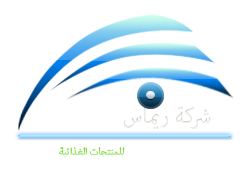
<style>
.page{position:relative;width:246px;height:180px;background:#ffffff}
.page>*{position:absolute;margin:0}
.t1{font:30px "AdobeArabic-Regular";color:#edeff0}
.t2{font:14px "AdobeArabic-Regular"}
</style>
<div class="page">
<p class="t1" style="left:124px;top:106px;width:87px;height:24px">شركة ريماس</p>
<p class="t2" style="left:59px;top:147px;width:66px;height:11px">للمنتجات الغذائية</p>
</div>
